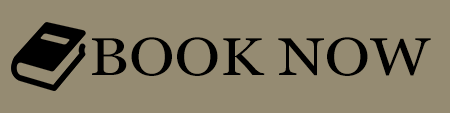
<style>
.page{position:relative;width:450px;height:113px;background:#958b72}
.page>*{position:absolute;margin:0}
.t1{font:53.1px "Georgia";color:#000000;scale:1.15 1}
</style>
<div class="page">
<p class="t1" style="left:92px;top:37px;width:339px;height:39px">BOOK NOW</p>
</div>
